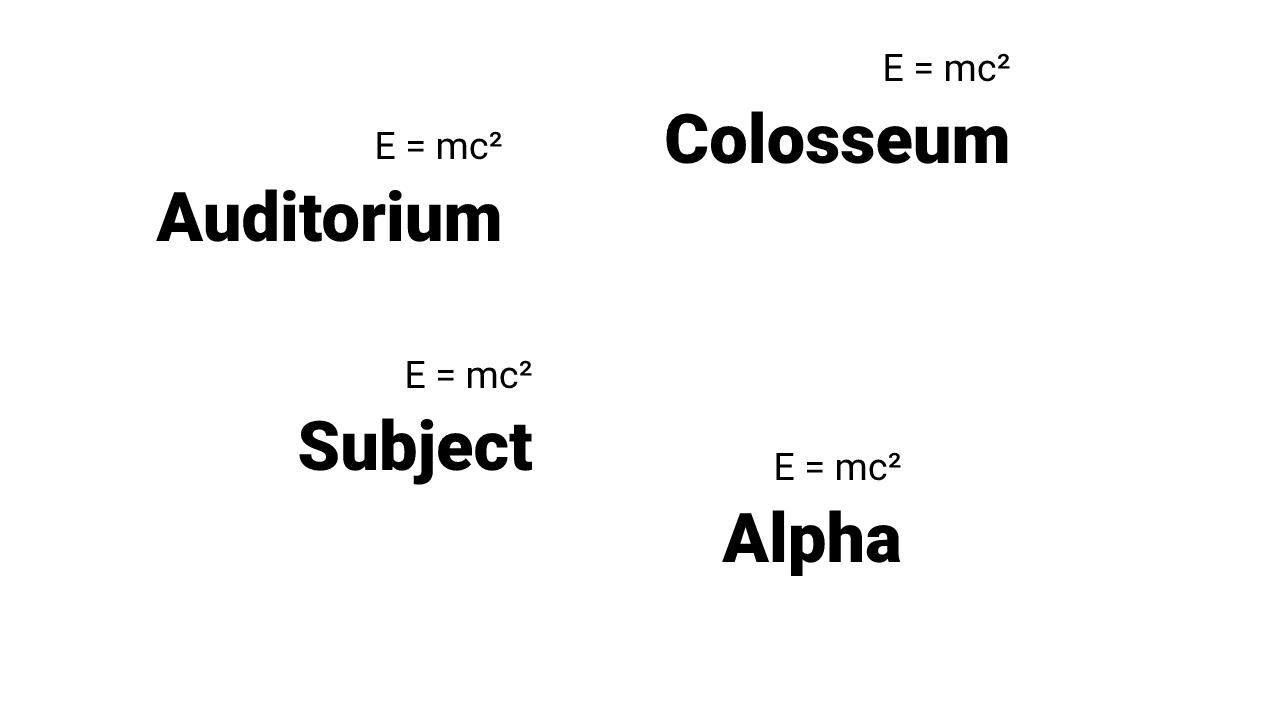
<style>
.page{position:relative;width:1280px;height:720px;background:#ffffff}
.page>*{position:absolute;margin:0}
.t1{font:68.6px "Roboto-Black";color:#000000}
.t2{font:38px "Roboto-Regular";color:#000000}
</style>
<div class="page">
<p class="t1" style="left:666px;top:53px;width:344px;height:111px;text-align:right"><span class="t2">E = mc² <br></span>Colosseum</p>
<p class="t1" style="left:156px;top:131px;width:346px;height:111px;text-align:right"><span class="t2">E = mc² <br></span>Auditorium</p>
<p class="t2" style="left:299px;top:360px;width:233px;height:125px;text-align:right">E = mc² <br><span class="t1">Subject</span></p>
<p class="t2" style="left:722px;top:452px;width:179px;height:124px;text-align:right">E = mc² <br><span class="t1">Alpha</span></p>
</div>
